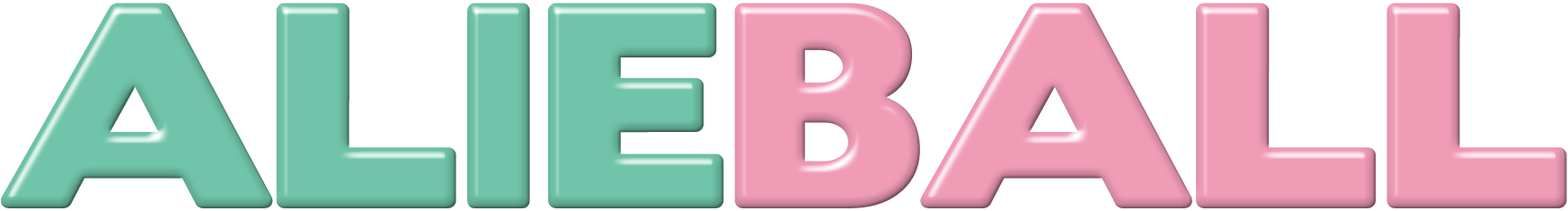
<style>
.page{position:relative;width:1568px;height:211px;background:#ffffff}
.page>*{position:absolute;margin:0}
.t1{font:261.5px "BorisBlackBloxx";color:#6fc4a9}
.t2{font:261.5px "BorisBlackBloxx";color:#f19cb7}
</style>
<div class="page">
<p class="t1" style="left:1px;top:3px;width:1566px;height:205px">ALIE<span class="t2">BALL</span></p>
</div>
